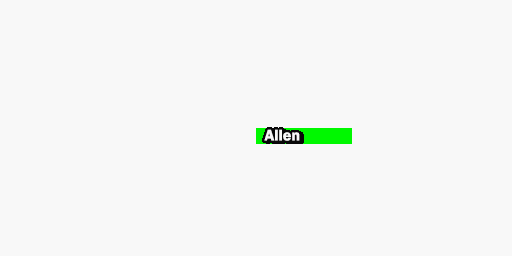
<style>
.page{position:relative;width:512px;height:256px;background:#f8f8f8}
.page>*{position:absolute;margin:0}
.t1{font:16px "FranklinGothic-Demi";color:#f8f8f8}
</style>
<div class="page">
<p class="t1" style="left:264px;top:129px;width:36px;height:12px">Allen</p>
</div>
